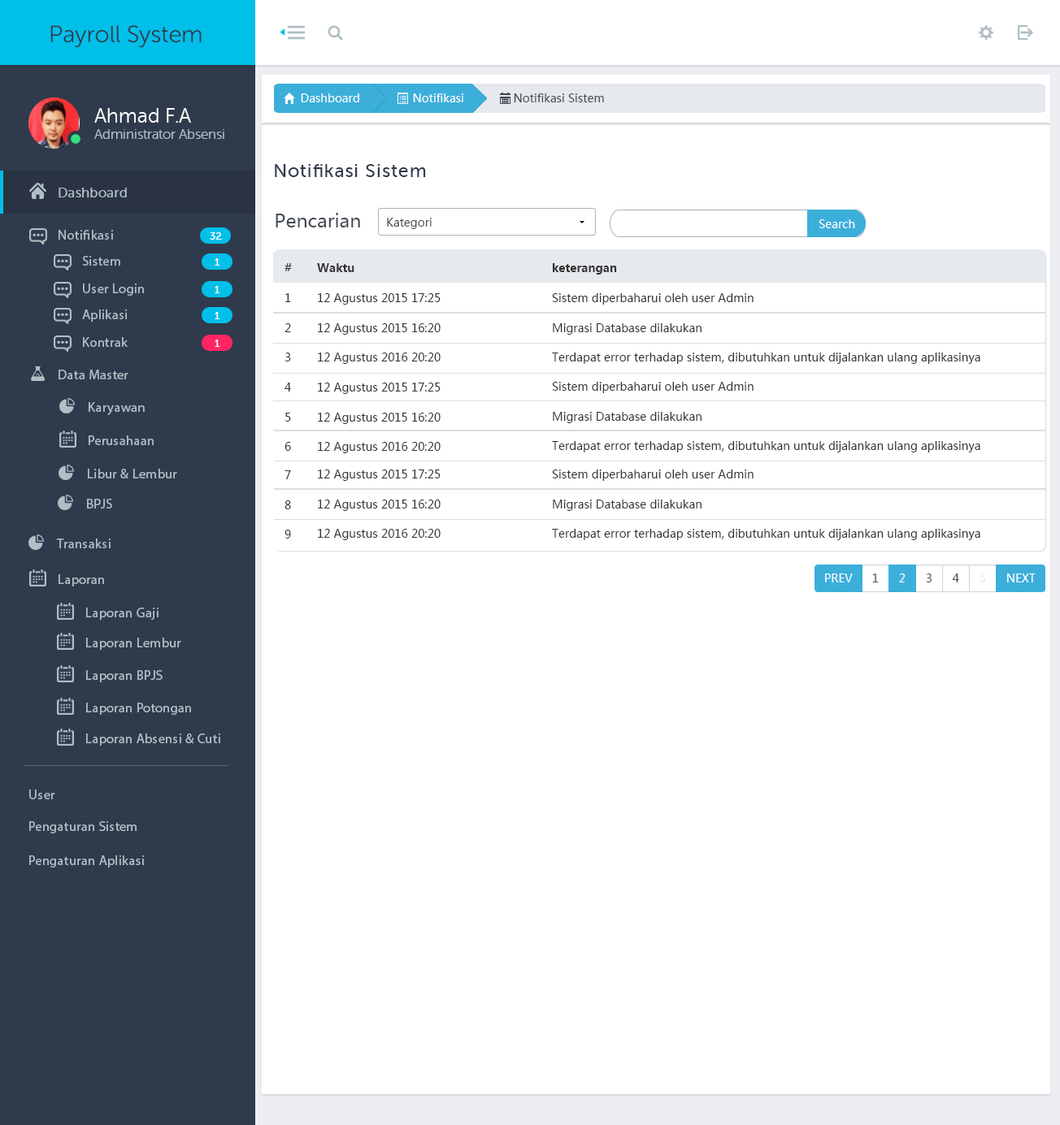
<style>
.page{position:relative;width:1060px;height:1125px;background:#ffffff}
.page>*{position:absolute;margin:0}
.t1{font:23.7px "MuseoSansRounded-300";color:#2f3b4c}
.t2{font:11.4px "MicrosoftYaHei";color:#ffffff}
.t3{font:11.4px "MicrosoftYaHei";color:#434a54}
.t4{font:13.5px "MuseoSansRounded-300";color:#b0bec5}
.t5{font:20.3px "MuseoSansRounded-300";color:#ffffff}
.t6{font:18.6px "MuseoSans-500";letter-spacing:0.04em;color:#2f3b4c}
.t7{font:13.5px "MuseoSans-500";letter-spacing:0.02em;color:#b0bec5}
.t8{font:18.6px "MicrosoftYaHei";color:#434a54}
.t9{font:13.5px "MyriadPro-Regular";letter-spacing:0.02em;color:#b0bec5}
.t10{font:10.2px "MuseoSans-500";letter-spacing:0.02em;color:#ffffff}
.t11{font:11.4px "MicrosoftYaHei-Bold";color:#333333}
.t12{font:11.4px "MicrosoftYaHei";color:#333333}
.t13{font:11.4px "MicrosoftYaHei";color:#e6e9ed}
</style>
<div class="page">
<p class="t1" style="left:50px;top:25px;width:152px;height:23px">Payroll System</p>
<p class="t2" style="left:301px;top:93px;width:58px;height:9px">Dashboard</p>
<p class="t2" style="left:413px;top:93px;width:50px;height:9px">Notifikasi</p>
<p class="t3" style="left:514px;top:93px;width:90px;height:9px">Notifikasi Sistem</p>
<p class="t4" style="left:94px;top:108px;width:130px;height:31px"><span class="t5">Ahmad F.A <br></span>Administrator Absensi</p>
<p class="t6" style="left:275px;top:164px;width:151px;height:13px">Notifikasi Sistem</p>
<p class="t7" style="left:59px;top:188px;width:68px;height:9px">Dashboard</p>
<p class="t8" style="left:275px;top:213px;width:85px;height:15px">Pencarian</p>
<p class="t3" style="left:387px;top:218px;width:44px;height:11px">Kategori</p>
<p class="t2" style="left:819px;top:219px;width:36px;height:9px">Search</p>
<p class="t9" style="left:59px;top:230px;width:54px;height:10px">Notifikasi</p>
<p class="t10" style="left:210px;top:232px;width:12px;height:8px">32</p>
<p class="t9" style="left:82px;top:256px;width:38px;height:10px">Sistem</p>
<p class="t10" style="left:215px;top:258px;width:5px;height:8px">1</p>
<p class="t11" style="left:284px;top:263px;width:8px;height:8px">#</p>
<p class="t11" style="left:317px;top:263px;width:37px;height:9px">Waktu</p>
<p class="t11" style="left:553px;top:263px;width:64px;height:12px">keterangan</p>
<p class="t9" style="left:83px;top:284px;width:61px;height:12px">User Login</p>
<p class="t10" style="left:215px;top:286px;width:5px;height:7px">1</p>
<p class="t12" style="left:285px;top:293px;width:6px;height:9px">1</p>
<p class="t12" style="left:318px;top:293px;width:122px;height:12px">12 Agustus 2015 17:25</p>
<p class="t12" style="left:552px;top:293px;width:201px;height:12px">Sistem diperbaharui oleh user Admin</p>
<p class="t9" style="left:82px;top:310px;width:46px;height:12px">Aplikasi</p>
<p class="t10" style="left:215px;top:312px;width:5px;height:7px">1</p>
<p class="t12" style="left:284px;top:323px;width:7px;height:9px">2</p>
<p class="t12" style="left:318px;top:323px;width:122px;height:12px">12 Agustus 2015 16:20</p>
<p class="t12" style="left:553px;top:323px;width:148px;height:12px">Migrasi Database dilakukan</p>
<p class="t9" style="left:83px;top:337px;width:45px;height:10px">Kontrak</p>
<p class="t10" style="left:215px;top:340px;width:5px;height:7px">1</p>
<p class="t12" style="left:284px;top:353px;width:7px;height:9px">3</p>
<p class="t12" style="left:318px;top:353px;width:122px;height:11px">12 Agustus 2016 20:20</p>
<p class="t12" style="left:552px;top:353px;width:428px;height:11px">Terdapat error terhadap sistem, dibutuhkan untuk dijalankan ulang aplikasinya</p>
<p class="t9" style="left:59px;top:370px;width:69px;height:9px">Data Master</p>
<p class="t12" style="left:284px;top:383px;width:7px;height:9px">4</p>
<p class="t12" style="left:318px;top:383px;width:122px;height:11px">12 Agustus 2015 17:25</p>
<p class="t12" style="left:552px;top:382px;width:201px;height:11px">Sistem diperbaharui oleh user Admin</p>
<p class="t9" style="left:89px;top:402px;width:56px;height:13px">Karyawan</p>
<p class="t12" style="left:285px;top:413px;width:6px;height:9px">5</p>
<p class="t12" style="left:318px;top:413px;width:122px;height:11px">12 Agustus 2015 16:20</p>
<p class="t12" style="left:553px;top:412px;width:148px;height:11px">Migrasi Database dilakukan</p>
<p class="t9" style="left:89px;top:436px;width:65px;height:9px">Perusahaan</p>
<p class="t12" style="left:284px;top:442px;width:7px;height:9px">6</p>
<p class="t12" style="left:318px;top:442px;width:122px;height:11px">12 Agustus 2016 20:20</p>
<p class="t12" style="left:552px;top:441px;width:428px;height:12px">Terdapat error terhadap sistem, dibutuhkan untuk dijalankan ulang aplikasinya</p>
<p class="t9" style="left:88px;top:469px;width:89px;height:10px">Libur &amp; Lembur</p>
<p class="t12" style="left:284px;top:470px;width:7px;height:9px">7</p>
<p class="t12" style="left:318px;top:470px;width:122px;height:11px">12 Agustus 2015 17:25</p>
<p class="t12" style="left:552px;top:470px;width:201px;height:11px">Sistem diperbaharui oleh user Admin</p>
<p class="t9" style="left:87px;top:499px;width:25px;height:10px">BPJS</p>
<p class="t12" style="left:284px;top:501px;width:7px;height:8px">8</p>
<p class="t12" style="left:318px;top:500px;width:122px;height:11px">12 Agustus 2015 16:20</p>
<p class="t12" style="left:553px;top:500px;width:148px;height:11px">Migrasi Database dilakukan</p>
<p class="t12" style="left:284px;top:530px;width:7px;height:9px">9</p>
<p class="t12" style="left:318px;top:529px;width:122px;height:11px">12 Agustus 2016 20:20</p>
<p class="t12" style="left:552px;top:529px;width:428px;height:11px">Terdapat error terhadap sistem, dibutuhkan untuk dijalankan ulang aplikasinya</p>
<p class="t9" style="left:56px;top:539px;width:55px;height:9px">Transaksi</p>
<p class="t9" style="left:59px;top:574px;width:45px;height:13px">Laporan</p>
<p class="t2" style="left:825px;top:574px;width:27px;height:9px">PREV</p>
<p class="t3" style="left:872px;top:574px;width:6px;height:9px">1</p>
<p class="t2" style="left:899px;top:574px;width:6px;height:9px">2</p>
<p class="t3" style="left:926px;top:574px;width:5px;height:9px">3</p>
<p class="t3" style="left:952px;top:574px;width:7px;height:9px">4</p>
<p class="t13" style="left:979px;top:574px;width:6px;height:9px">5</p>
<p class="t2" style="left:1007px;top:574px;width:28px;height:9px">NEXT</p>
<p class="t9" style="left:86px;top:608px;width:72px;height:12px">Laporan Gaji</p>
<p class="t9" style="left:86px;top:638px;width:95px;height:12px">Laporan Lembur</p>
<p class="t9" style="left:86px;top:670px;width:77px;height:13px">Laporan BPJS</p>
<p class="t9" style="left:86px;top:703px;width:105px;height:12px">Laporan Potongan</p>
<p class="t9" style="left:86px;top:734px;width:134px;height:12px">Laporan Absensi &amp; Cuti</p>
<p class="t9" style="left:29px;top:790px;width:26px;height:10px">User</p>
<p class="t9" style="left:29px;top:821px;width:108px;height:13px">Pengaturan Sistem</p>
<p class="t9" style="left:29px;top:856px;width:115px;height:12px">Pengaturan Aplikasi</p>
</div>
